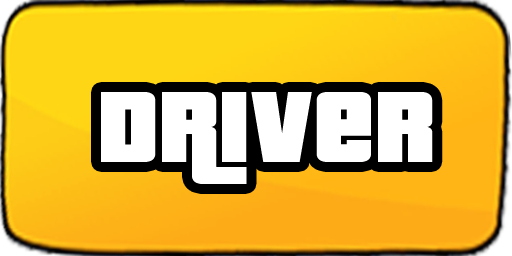
<style>
.page{position:relative;width:512px;height:256px}
.page>*{position:absolute;margin:0}
.t1{font:109.7px "PricedownBl-Regular";letter-spacing:0.012em;color:#ffffff;scale:1.06 1}
</style>
<div class="page">
<p class="t1" style="left:101px;top:92px;width:332px;height:92px">Driver</p>
</div>
